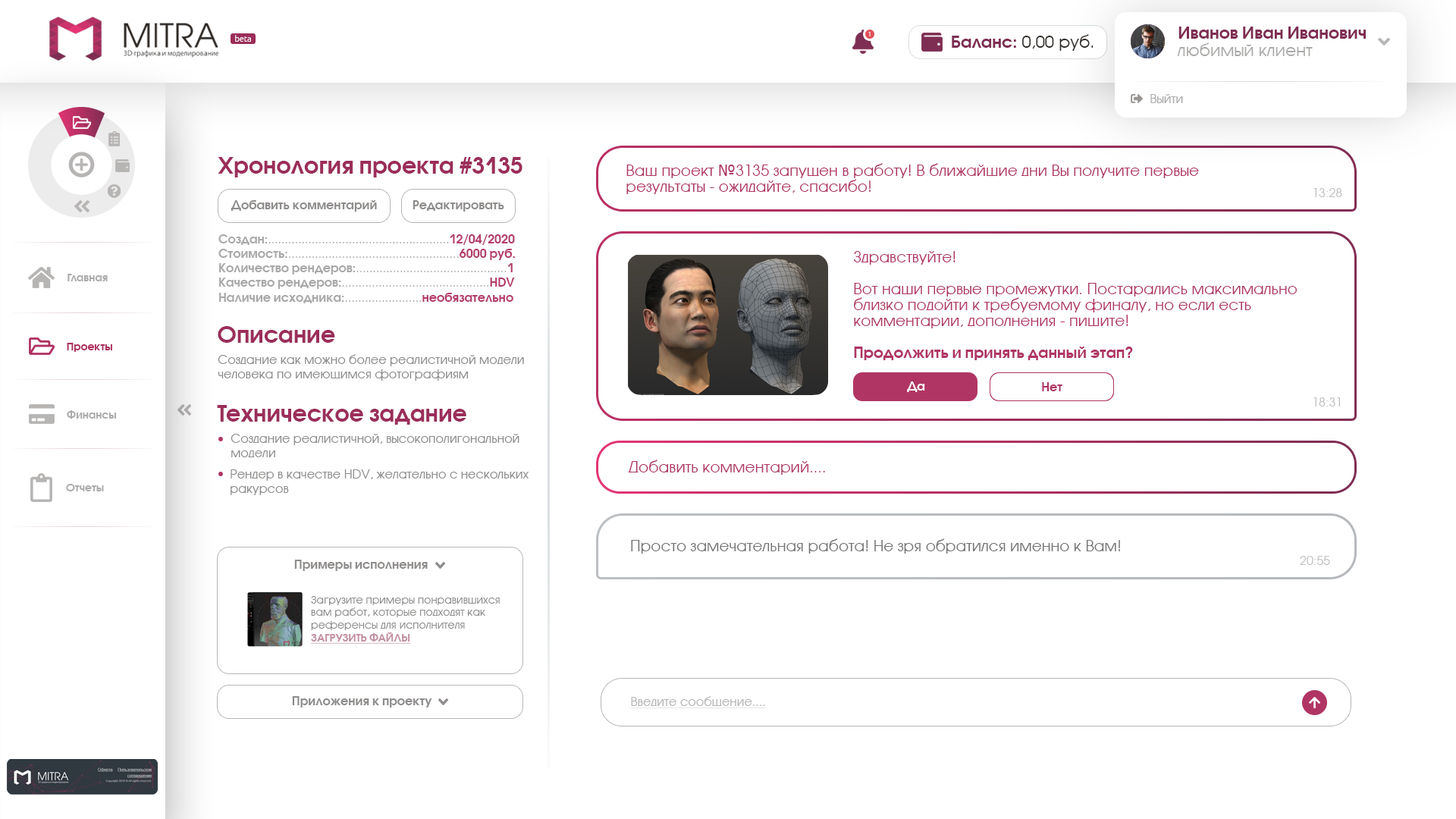
<style>
.page{position:relative;width:1456px;height:819px;background:#ffffff}
.page>*{position:absolute;margin:0}
.t1{font:16.7px "AvantGardeCTT-Bold";color:#7e2e53}
.t2{font:8.3px "Ubuntu-Light";color:#fefefe}
.t3{font:6.1px "AvantGarde";color:#ffffff}
.t4{font:16.7px "AvantGarde";color:#332e2a}
.t5{font:16.7px "AvantGarde";color:#abaaa9}
.t6{font:12.1px "AvantGarde";color:#acabaa}
.t7{font:22.7px "AvantGardeCTT-Bold";color:#9b2e5a}
.t8{font:15.2px/15.9px "AvantGarde";color:#b03564}
.t9{font:15.2px/15.9px "Tahoma";color:#b03564}
.t10{font:12.1px "AvantGarde";color:#c2c2c2}
.t11{font:12.1px "AvantGardeCTT-Bold";color:#8f8d8c}
.t12{font:12.1px "AvantGarde";color:#a9a9a9}
.t13{font:12.1px "AvantGardeCTT-Bold";color:#a9a9a9}
.t14{font:12.1px "AvantGardeCTT-Bold";color:#b43e6c}
.t15{font:15.2px/15.9px "AvantGardeCTT-Bold";color:#b03564}
.t16{font:10.6px "AvantGardeCTT-Bold";color:#adacab}
.t17{font:10.6px "AvantGardeCTT-Bold";color:#af3060}
.t18{font:12.1px "AvantGarde";color:#8f8d8c}
.t19{font:12.1px "AvantGardeCTT-Bold";color:#ffffff}
.t20{font:12.1px "AvantGardeCTT-Bold";color:#b03564}
.t21{font:15.2px "AvantGarde";color:#b03564}
.t22{font:15.2px "AvantGarde";color:#737373}
.t23{font:11.9px "AvantGarde";color:#c2c2c2}
.t24{font:10.6px "AvantGarde"}
.t25{font:10.6px "AvantGardeCTT-Bold";text-decoration:underline}
.t26{font:12.1px "AvantGarde";color:#b8b6b5;text-decoration:underline}
</style>
<div class="page">
<p class="t1" style="left:1178px;top:27px;width:188px;height:12px">Иванов Иван Иванович</p>
<p class="t2" style="left:235px;top:35px;width:16px;height:7px">beta</p>
<p class="t3" style="left:868px;top:32px;width:3px;height:4px">1</p>
<p class="t4" style="left:952px;top:34px;width:142px;height:17px"><span class="t1">Баланс: </span>0,00 руб.</p>
<p class="t5" style="left:1177px;top:42px;width:136px;height:14px">любимый клиент</p>
<p class="t6" style="left:1150px;top:94px;width:33px;height:9px">Выйти</p>
<p class="t7" style="left:218px;top:157px;width:304px;height:20px">Хронология проекта #3135</p>
<p class="t8" style="left:626px;top:163px;width:573px;height:31px">Ваш проект <span class="t9">№</span>3135 запущен в работу! В ближайшие дни Вы получите первые <br>результаты - ожидайте, спасибо!</p>
<p class="t10" style="left:1313px;top:188px;width:29px;height:9px">13:28</p>
<p class="t11" style="left:231px;top:200px;width:146px;height:12px">Добавить комментарий</p>
<p class="t11" style="left:413px;top:200px;width:91px;height:12px">Редактировать</p>
<p class="t12" style="left:218px;top:234px;width:297px;height:69px"><span class="t13">Создан:</span>......................................................<span class="t14">12/04/2020<br></span><span class="t13">Стоимость:</span>...................................................<span class="t14">6000 руб.<br></span><span class="t13">Количество рендеров:</span>.............................................<span class="t14">1<br></span><span class="t13">Качество рендеров:</span>............................................<span class="t14">HDV<br></span><span class="t13">Наличие исходника:</span>.......................<span class="t14">необязательно</span></p>
<p class="t8" style="left:854px;top:251px;width:443px;height:109px">Здравствуйте!<br><br>Вот наши первые промежутки. Постарались максимально<br>близко подойти к требуемому финалу, но если есть<br>комментарии, дополнения - пишите!<br><br><span class="t15">Продолжить и принять данный этап?</span></p>
<p class="t16" style="left:67px;top:274px;width:41px;height:7px">Главная</p>
<p class="t7" style="left:218px;top:326px;width:117px;height:17px">Описание</p>
<p class="t17" style="left:67px;top:343px;width:45px;height:9px">Проекты</p>
<p class="t18" style="left:218px;top:354px;width:306px;height:27px">Создание как можно более реалистичной модели<br>человека по имеющимся фотографиям</p>
<p class="t19" style="left:907px;top:381px;width:18px;height:11px">Да</p>
<p class="t20" style="left:1042px;top:382px;width:20px;height:9px">Нет</p>
<p class="t10" style="left:1313px;top:397px;width:27px;height:9px">18:31</p>
<p class="t16" style="left:67px;top:410px;width:49px;height:9px">Финансы</p>
<p class="t7" style="left:217px;top:405px;width:249px;height:20px">Техническое задание</p>
<p class="t18" style="left:231px;top:434px;width:288px;height:23px">Создание реалистичной, высокополигональной<br>модели</p>
<p class="t21" style="left:628px;top:460px;width:197px;height:15px">Добавить комментарий....</p>
<p class="t18" style="left:231px;top:469px;width:298px;height:26px">Рендер в качестве HDV, желательно с нескольких<br>ракурсов</p>
<p class="t16" style="left:66px;top:484px;width:38px;height:7px">Отчеты</p>
<p class="t22" style="left:631px;top:538px;width:489px;height:16px">Просто замечательная работа! Не зря обратился именно к Вам!</p>
<p class="t23" style="left:1300px;top:556px;width:30px;height:9px">20:55</p>
<p class="t11" style="left:294px;top:560px;width:134px;height:11px">Примеры исполнения</p>
<p class="t24" style="left:311px;top:596px;width:189px;height:48px">Загрузите примеры понравившихся<br>вам работ, которые подходят как<br>референсы для исполнителя<br><span class="t25">ЗАГРУЗИТЬ ФАЙЛЫ</span></p>
<p class="t11" style="left:292px;top:696px;width:140px;height:12px">Приложения к проекту</p>
<p class="t26" style="left:630px;top:696px;width:136px;height:12px">Введите сообщение....</p>
</div>
